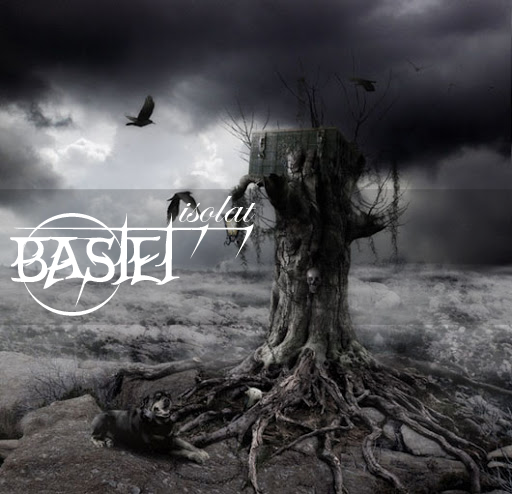
<style>
.page{position:relative;width:512px;height:494px}
.page>*{position:absolute;margin:0}
.t1{font:51.3px "EdwardianScriptITC";color:#ffffff;scale:1.09 1}
.t2{font:99.2px "CrEAtoRcAmpoTYPeSmcP";color:#ffffff}
</style>
<div class="page">
<p class="t1" style="left:179px;top:196px;width:77px;height:26px">isolat</p>
<p class="t2" style="left:10px;top:213px;width:244px;height:103px">bastet</p>
</div>
